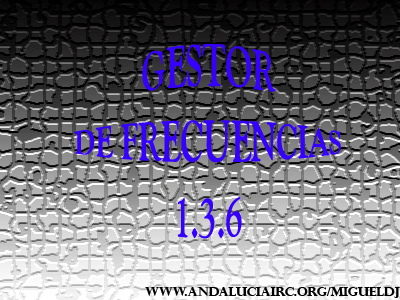
<style>
.page{position:relative;width:400px;height:300px}
.page>*{position:absolute;margin:0}
.t1{font:31.8px "GoudyOldStyleT-Bold";color:#3600ff}
.t2{font:12.7px "PerpetuaTitlingMT-Bold";color:#000000}
</style>
<div class="page">
<p class="t1" style="left:74px;top:44px;width:267px;height:195px;text-align:center">GESTOR<br>DE FRECUENCIAS<br>1.3.6</p>
<p class="t2" style="left:145px;top:287px;width:255px;height:11px">www.andaluciairc.org/migueldj</p>
</div>
